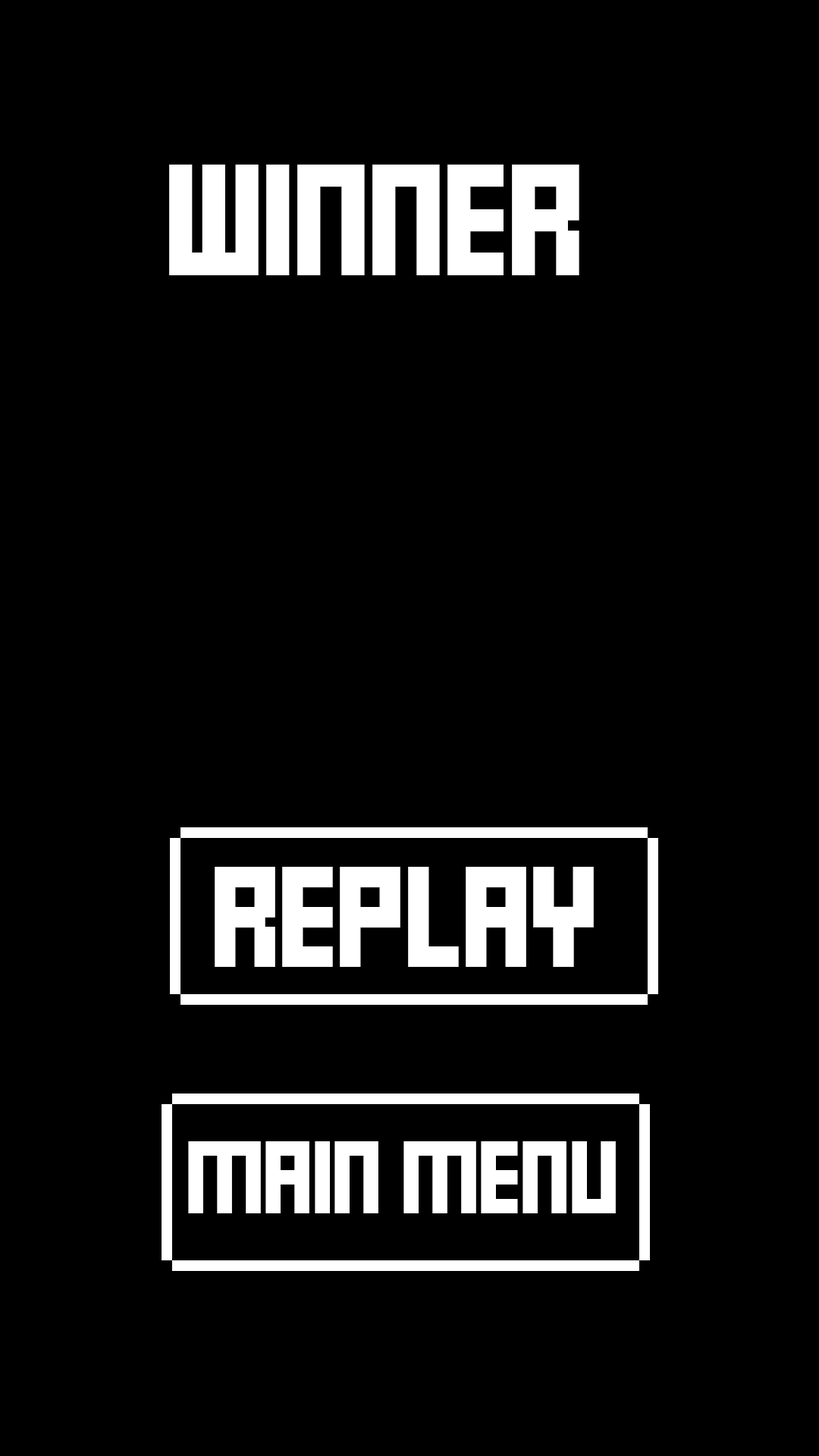
<style>
.page{position:relative;width:819px;height:1456px;background:#000000}
.page>*{position:absolute;margin:0}
.t1{font:151.7px "FFFForward";letter-spacing:-0.025em;color:#ffffff}
.t2{font:136.5px "FFFForward";letter-spacing:-0.025em;color:#ffffff}
.t3{font:98.6px "FFFForward";letter-spacing:-0.025em;color:#ffffff}
</style>
<div class="page">
<p class="t1" style="left:169px;top:165px;width:410px;height:110px">WINNER</p>
<p class="t2" style="left:215px;top:867px;width:379px;height:100px">REPLAY</p>
<p class="t3" style="left:188px;top:1141px;width:428px;height:72px">MAIN MENU</p>
</div>
